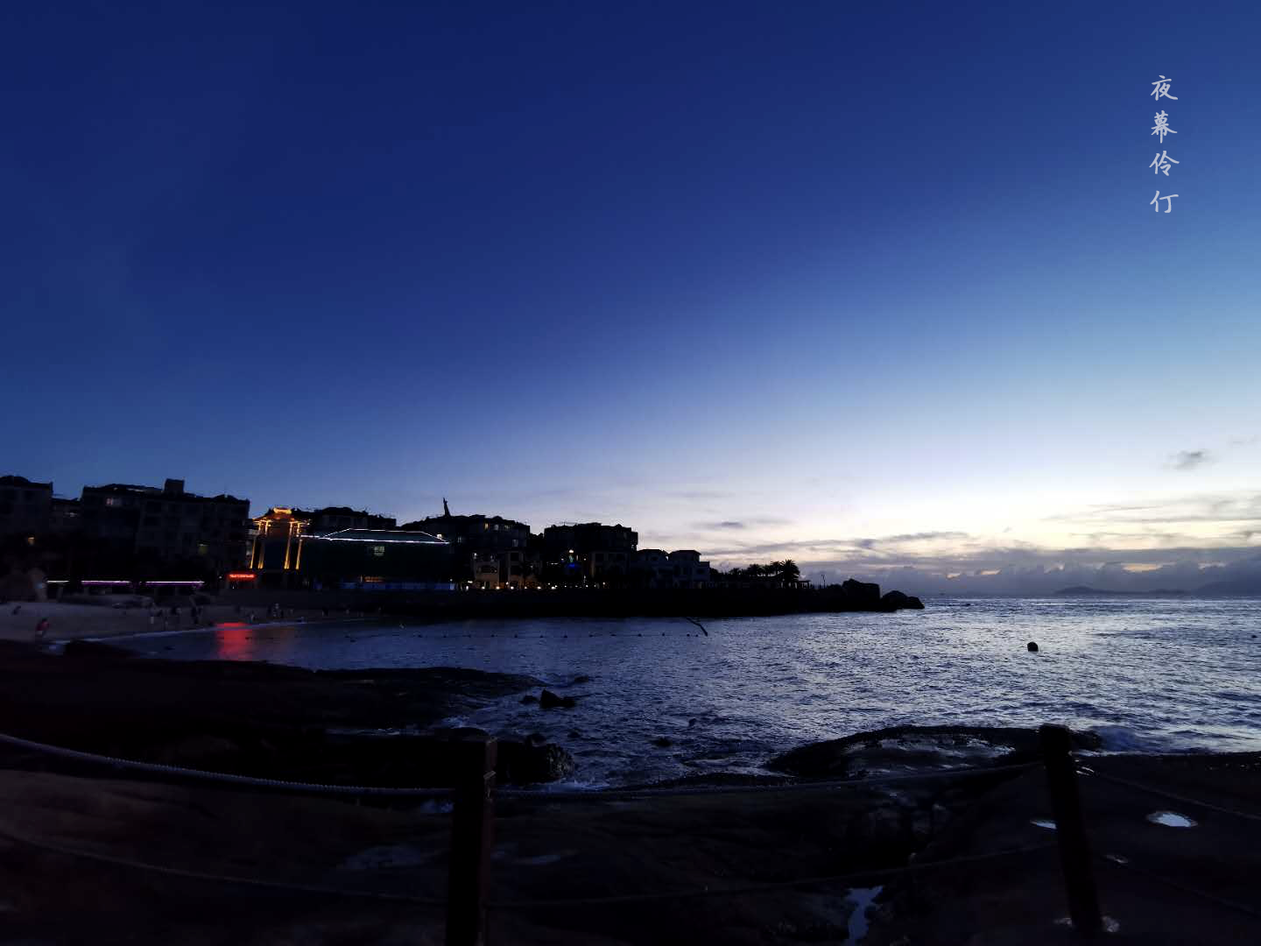
<style>
.page{position:relative;width:1261px;height:946px}
.page>*{position:absolute;margin:0}
.t1{font:31.5px "QXyingbikai";color:#b5bbcf;font-weight:bold}
</style>
<div class="page">
<p class="t1" style="left:1149px;top:75px;width:30px;height:138px">夜<br>幕<br>伶<br>仃</p>
</div>
